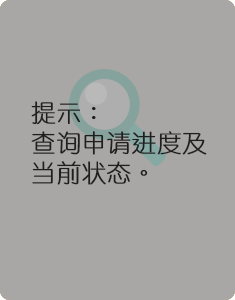
<style>
.page{position:relative;width:235px;height:300px;background:#a8a7a5}
.page>*{position:absolute;margin:0}
.t1{font:24px/30px "STYuanti-TC-Light";letter-spacing:0.02em;color:#201f1f;font-weight:bold}
</style>
<div class="page">
<p class="t1" style="left:31px;top:101px;width:176px;height:84px">提示：<br>查询申请进度及当前状态。</p>
</div>
